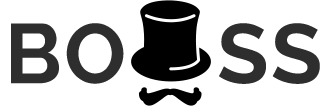
<style>
.page{position:relative;width:332px;height:106px;background:#ffffff}
.page>*{position:absolute;margin:0}
.t1{font:84px "Raleway-Bold";letter-spacing:0.025em;color:#2e2e2e;text-transform:uppercase}
</style>
<div class="page">
<p class="t1" style="left:11px;top:23px;width:309px;height:61px">bo    ss</p>
</div>
